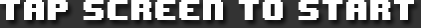
<style>
.page{position:relative;width:421px;height:28px;background:#ffffff}
.page>*{position:absolute;margin:0}
.t1{font:24px "8BITWONDERNominal";color:#ffffff}
</style>
<div class="page">
<p class="t1" style="left:0px;top:0px;width:414px;height:20px">tap screen to start</p>
</div>
